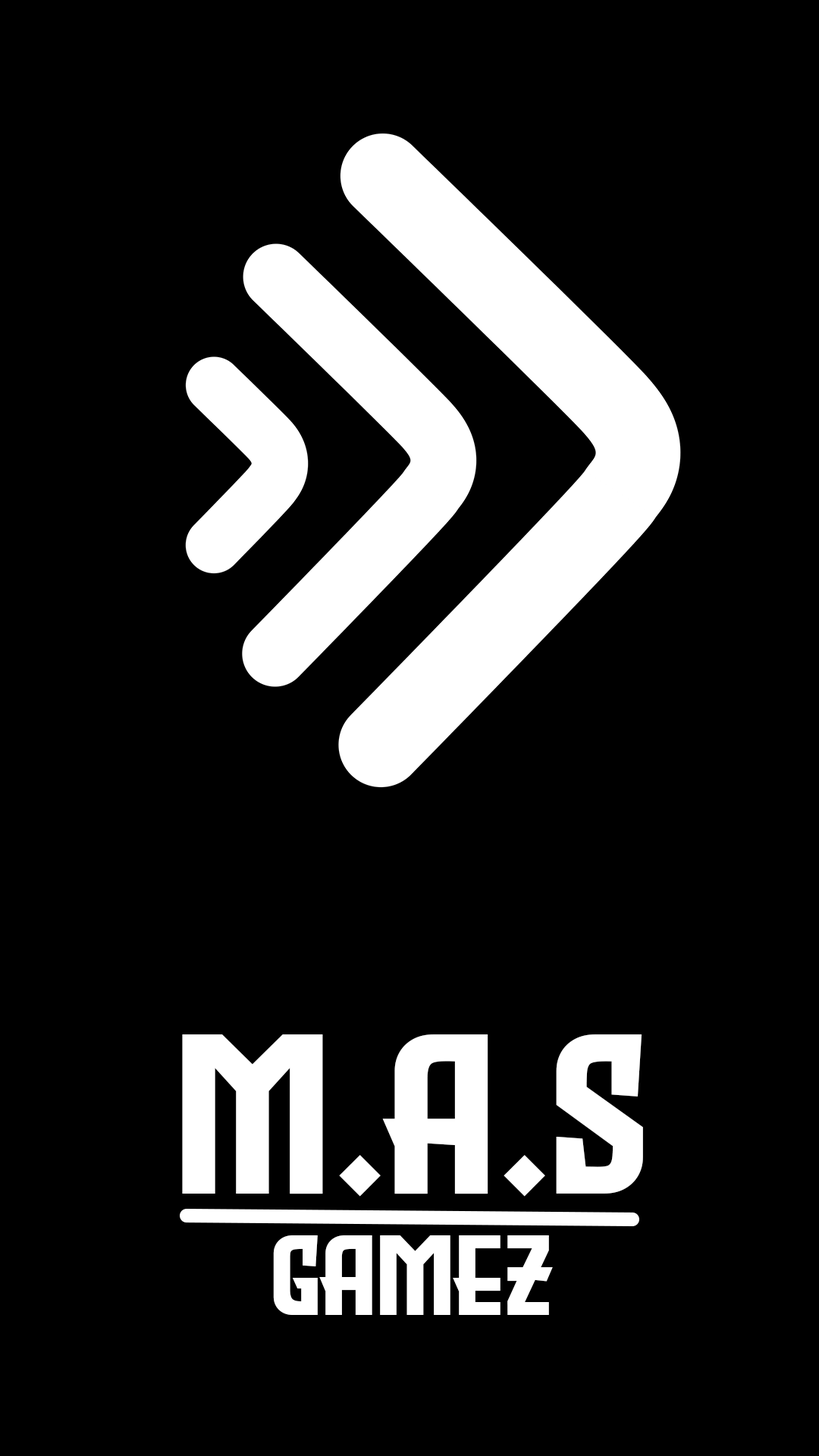
<style>
.page{position:relative;width:819px;height:1456px;background:#000000}
.page>*{position:absolute;margin:0}
.t1{font:227.5px "EvilEmpire";color:#ffffff}
.t2{font:113.7px "EvilEmpire";color:#ffffff}
</style>
<div class="page">
<p class="t1" style="left:182px;top:1034px;width:461px;height:163px">M.a.s</p>
<p class="t2" style="left:273px;top:1235px;width:280px;height:80px">gamez</p>
</div>
